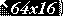
<style>
.page{position:relative;width:64px;height:16px;background:#000000}
.page>*{position:absolute;margin:0}
.t1{font:18px "AGaramondPro-BoldItalic";color:#ffffff}
</style>
<div class="page">
<p class="t1" style="left:11px;top:1px;width:46px;height:13px">64x16</p>
</div>
